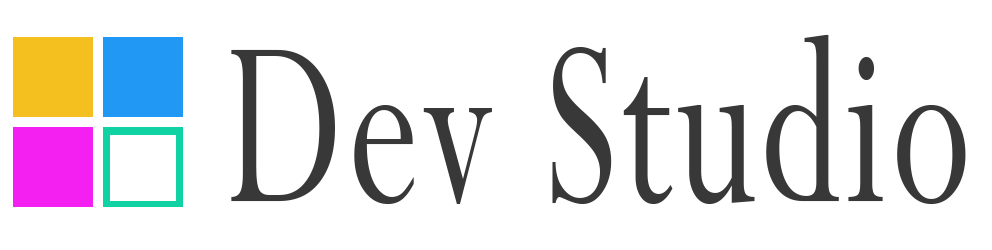
<style>
.page{position:relative;width:992px;height:250px;background:#ffffff}
.page>*{position:absolute;margin:0}
.t1{font:264px "Perpetua";letter-spacing:0.025em;color:#393838;scale:0.67 1}
</style>
<div class="page">
<p class="t1" style="left:231px;top:34px;width:735px;height:170px">Dev Studio</p>
</div>
